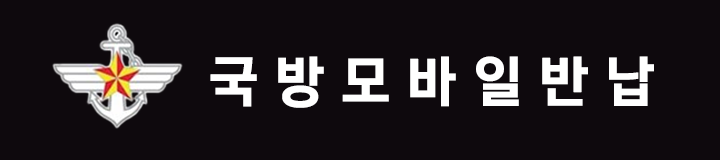
<style>
.page{position:relative;width:720px;height:160px;background:#0e090d}
.page>*{position:absolute;margin:0}
.t1{font:55px "NEXONLv2GothicBold";letter-spacing:0.3em;color:#ffffff;font-weight:bold}
</style>
<div class="page">
<p class="t1" style="left:210px;top:56px;width:444px;height:52px">국방모바일반납</p>
</div>
